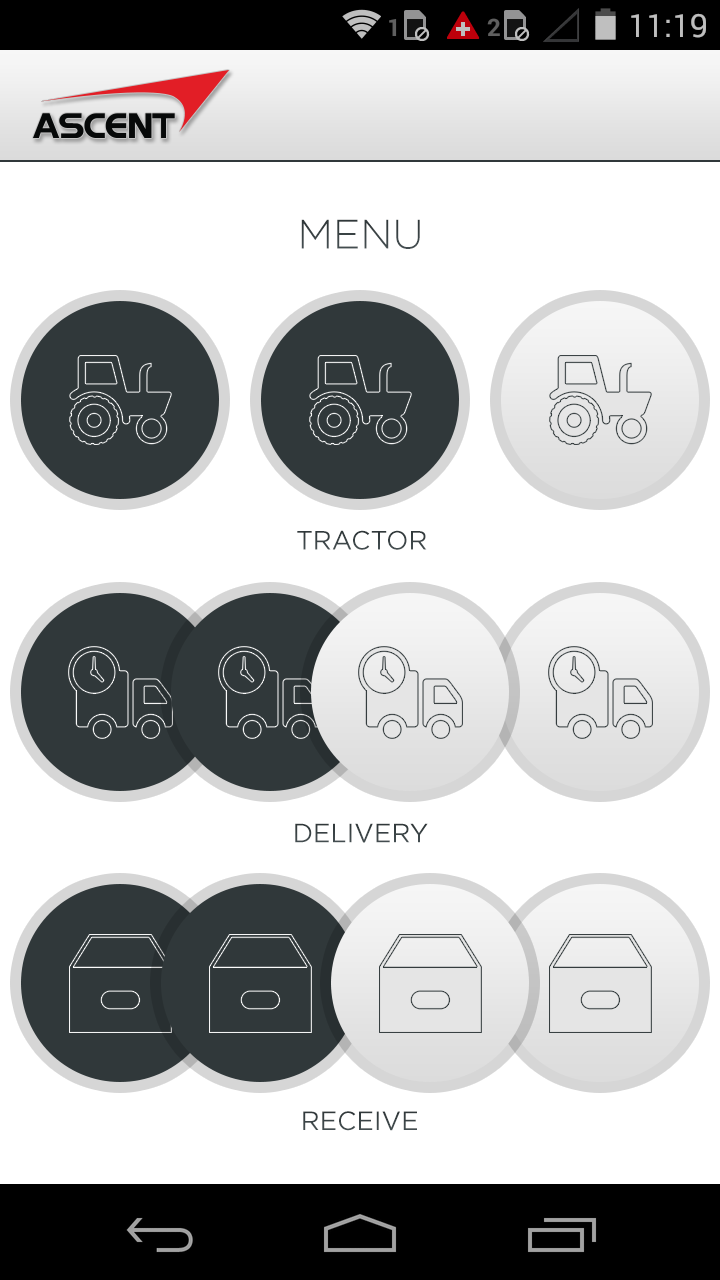
<style>
.page{position:relative;width:720px;height:1280px;background:#ffffff}
.page>*{position:absolute;margin:0}
.t1{font:41.1px "Gotham-Light";color:#30383a}
.t2{font:26.3px "Gotham-Book";color:#30383a}
</style>
<div class="page">
<p class="t1" style="left:301px;top:219px;width:119px;height:30px">MENU</p>
<p class="t2" style="left:297px;top:530px;width:130px;height:20px">TRACTOR</p>
<p class="t2" style="left:295px;top:823px;width:133px;height:20px">DELIVERY</p>
<p class="t2" style="left:303px;top:1111px;width:114px;height:20px">RECEIVE</p>
</div>
